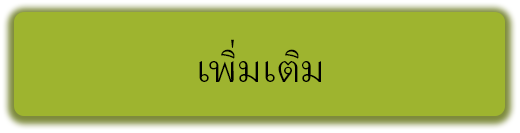
<style>
.page{position:relative;width:520px;height:133px;background:#9eb42f}
.page>*{position:absolute;margin:0}
.t1{font:50px "AdobeThai-Regular";color:#000000}
</style>
<div class="page">
<p class="t1" style="left:199px;top:39px;width:122px;height:43px">เพิ่มเติม</p>
</div>
